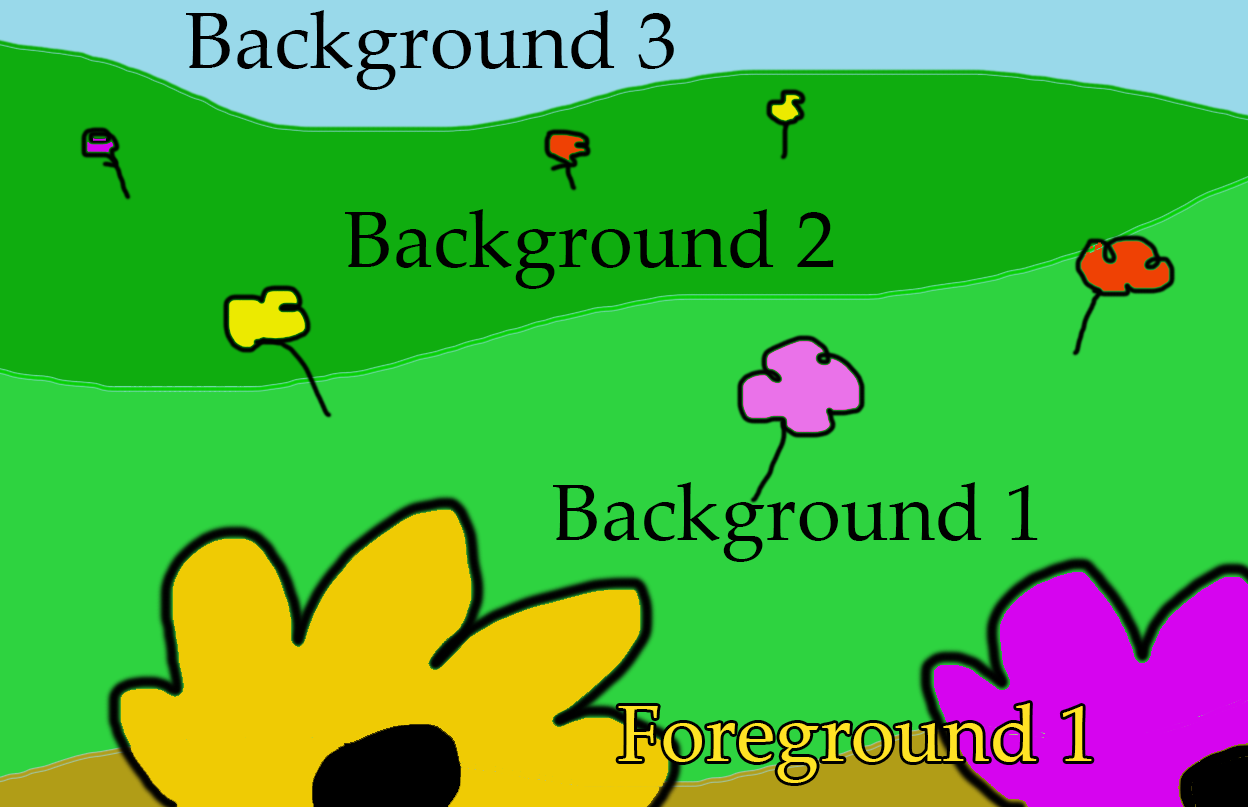
<style>
.page{position:relative;width:1248px;height:807px;background:#2ed340}
.page>*{position:absolute;margin:0}
.t1{font:80px "PalatinoLinotype-Roman";color:#000000}
.t2{font:80px "PalatinoLinotype-Roman";color:#ffe325}
</style>
<div class="page">
<p class="t1" style="left:186px;top:10px;width:488px;height:80px">Background 3</p>
<p class="t1" style="left:345px;top:209px;width:489px;height:80px">Background 2</p>
<p class="t1" style="left:553px;top:482px;width:485px;height:80px">Background 1</p>
<p class="t2" style="left:618px;top:703px;width:474px;height:80px">Foreground 1</p>
</div>
